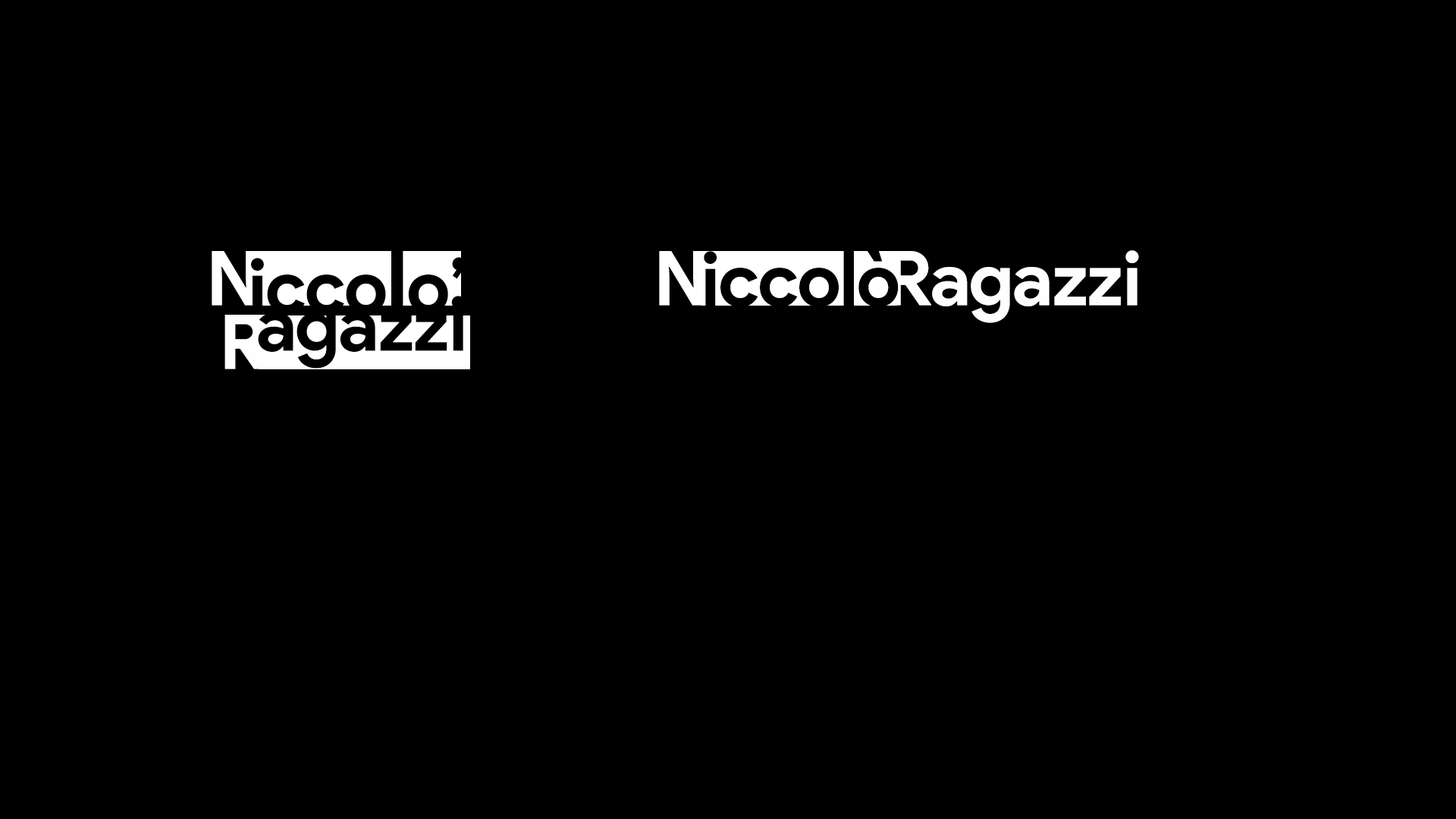
<style>
.page{position:relative;width:1456px;height:819px;background:#000000}
.page>*{position:absolute;margin:0}
.t1{font:75.8px "ProductSans-Bold";letter-spacing:-0.02em;color:#ffffff}
.t2{font:75.8px "ProductSans-Bold";letter-spacing:-0.02em;color:#000000}
.t3{font:89.5px "ProductSans-Bold";letter-spacing:-0.02em;color:#000000}
.t4{font:77.3px "ProductSans-Bold";letter-spacing:-0.02em;color:#000000}
.t5{font:75.8px "ProductSans-Bold";letter-spacing:-0.02em;color:#fefefe}
</style>
<div class="page">
<p class="t1" style="left:212px;top:251px;width:44px;height:55px">N</p>
<p class="t2" style="left:251px;top:249px;width:215px;height:65px">icco<span class="t3">l</span>o’</p>
<p class="t1" style="left:659px;top:251px;width:45px;height:55px">N</p>
<p class="t2" style="left:704px;top:250px;width:195px;height:57px">icco<span class="t4">l</span>ò</p>
<p class="t5" style="left:890px;top:250px;width:249px;height:73px">Ragazzi</p>
<p class="t2" style="left:258px;top:296px;width:207px;height:73px">agazzi</p>
<p class="t5" style="left:224px;top:315px;width:42px;height:54px">R</p>
</div>
